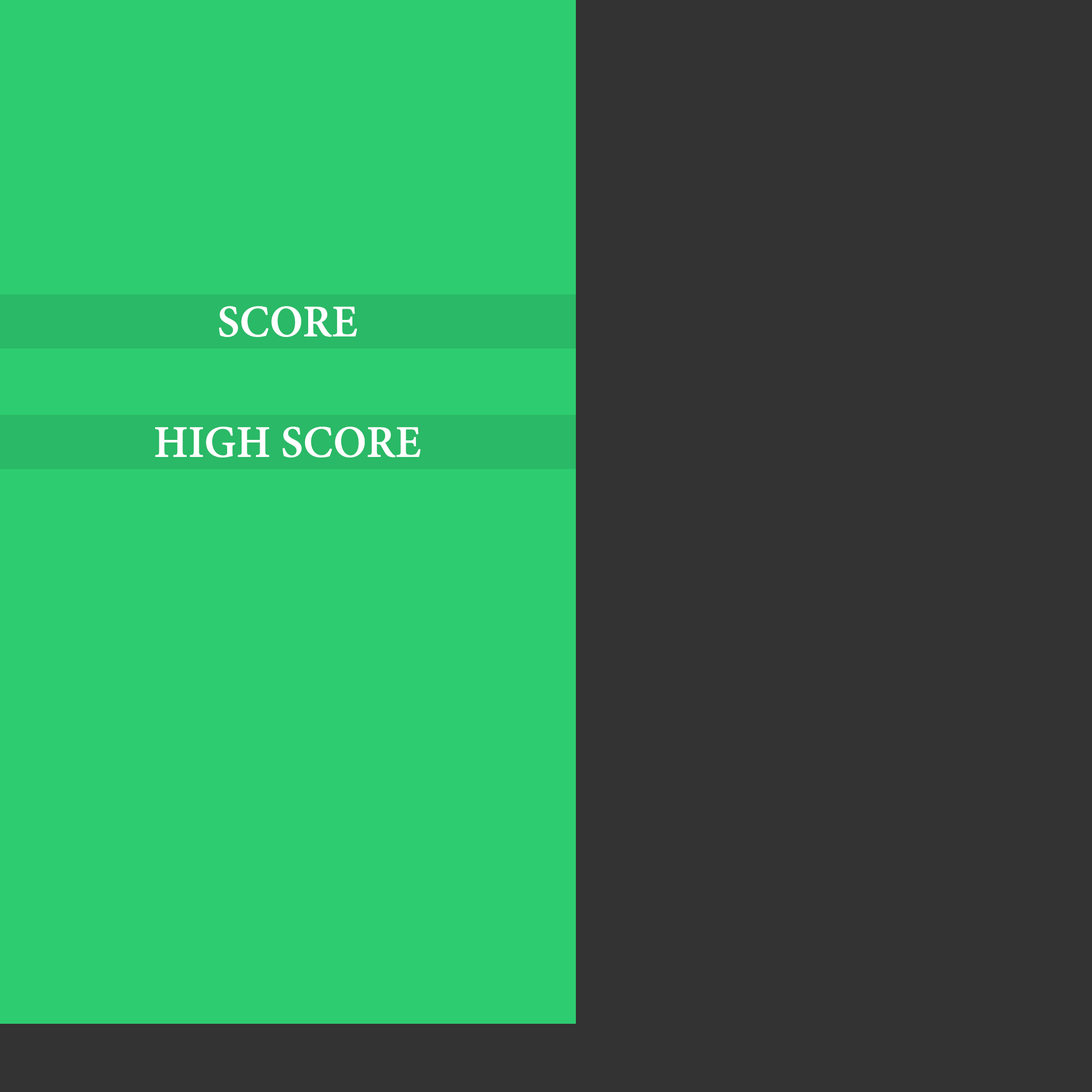
<style>
.page{position:relative;width:1092px;height:1092px;background:#333333}
.page>*{position:absolute;margin:0}
.t1{font:49.1px "AdobeGurmukhi-Bold";color:#ffffff;text-transform:uppercase}
</style>
<div class="page">
<p class="t1" style="left:219px;top:306px;width:138px;height:31px">SCORE</p>
<p class="t1" style="left:155px;top:427px;width:266px;height:30px">HIGH SCORE</p>
</div>
